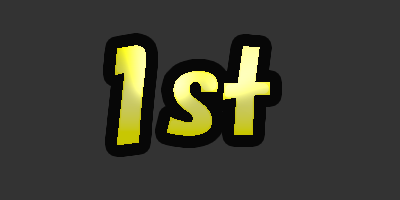
<style>
.page{position:relative;width:400px;height:200px;background:#333333}
.page>*{position:absolute;margin:0}
.t1{font:110px "HGPSoeiKakupoptai"}
</style>
<div class="page">
<p class="t1" style="left:115px;top:45px;width:155px;height:100px">1st</p>
</div>
